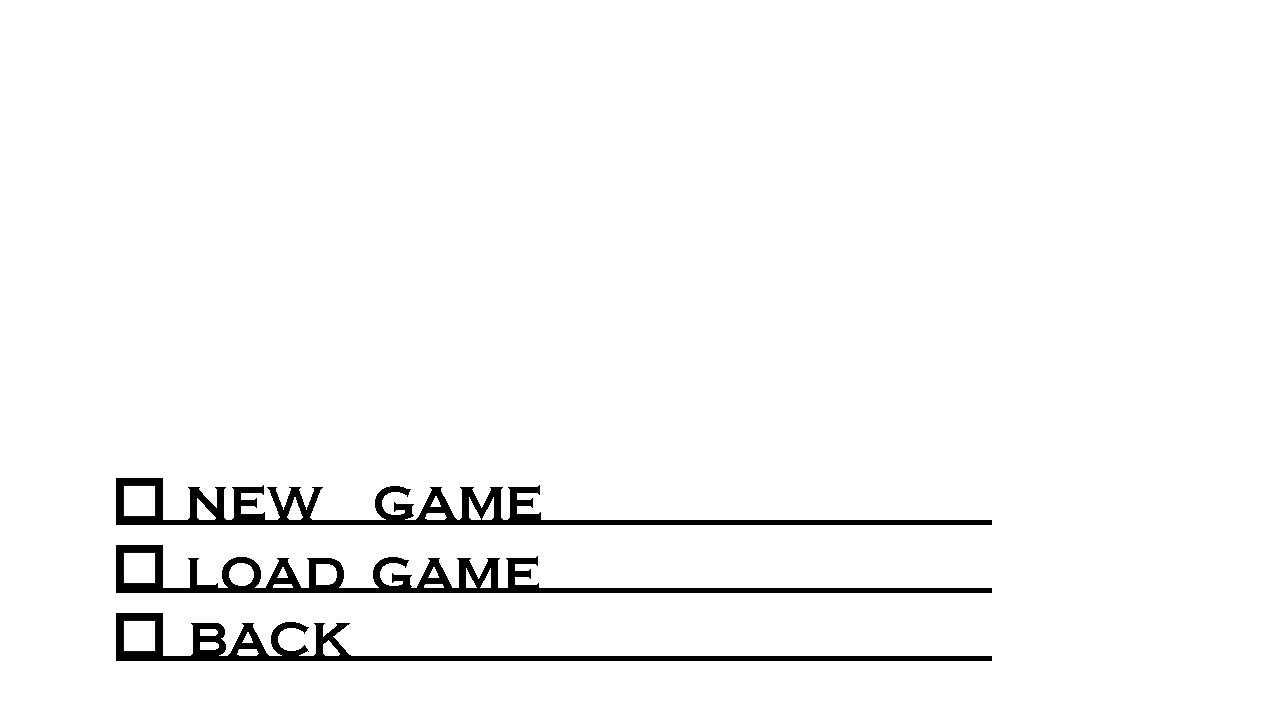
<style>
.page{position:relative;width:1280px;height:720px;background:#ffffff}
.page>*{position:absolute;margin:0}
.t1{font:50px "CopperplateGothic-Bold";color:#000000}
</style>
<div class="page">
<p class="t1" style="left:188px;top:485px;width:353px;height:37px">NEW    GAME</p>
<p class="t1" style="left:188px;top:556px;width:351px;height:37px">LOAD  GAME</p>
<p class="t1" style="left:191px;top:622px;width:160px;height:35px">BACK</p>
</div>
